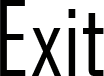
<style>
.page{position:relative;width:104px;height:76px;background:#ffffff}
.page>*{position:absolute;margin:0}
.t1{font:100px "AgencyFB-Reg";color:#010100}
</style>
<div class="page">
<p class="t1" style="left:0px;top:0px;width:104px;height:76px">Exit</p>
</div>
